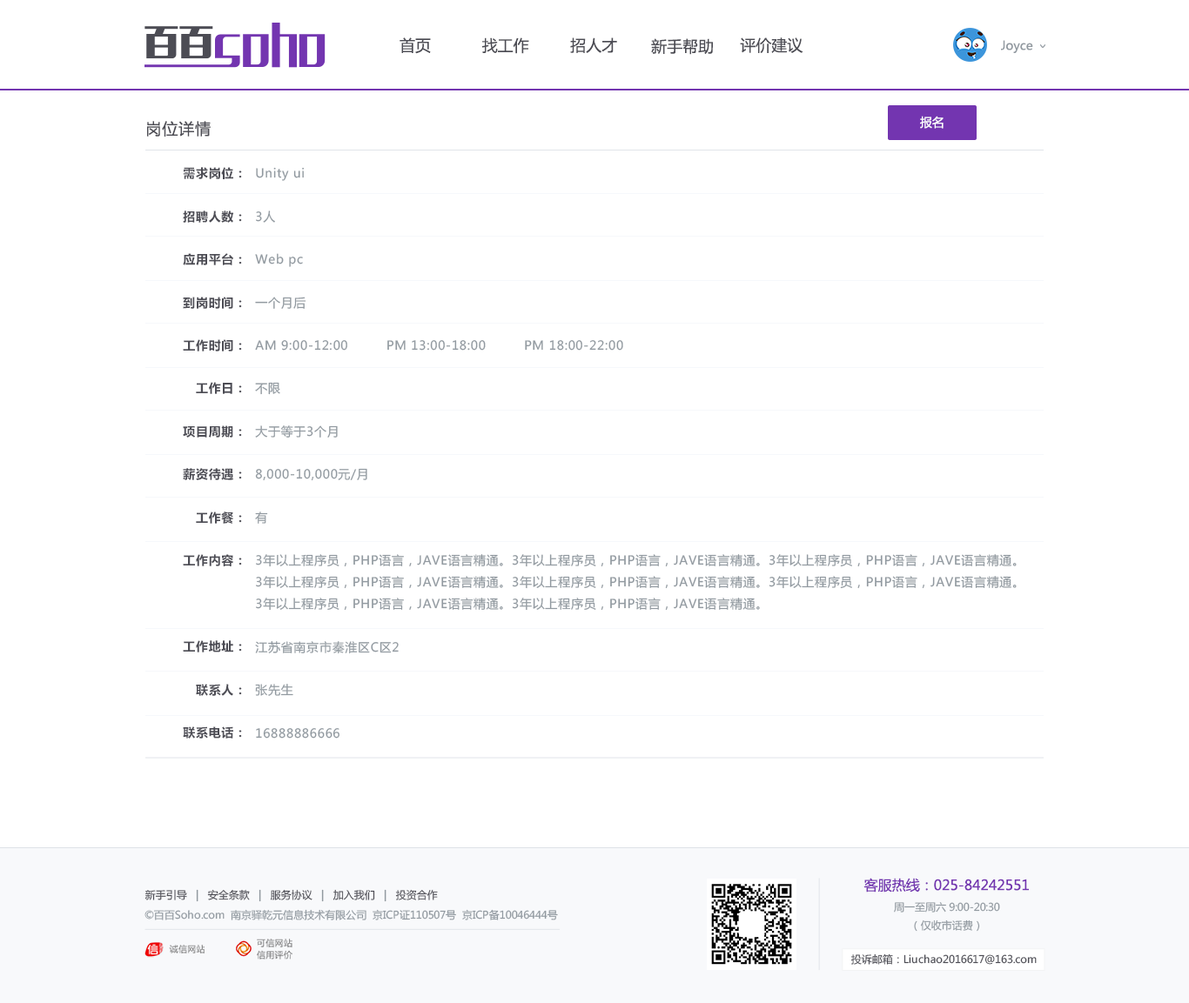
<style>
.page{position:relative;width:1189px;height:1003px;background:#ffffff}
.page>*{position:absolute;margin:0}
.t1{font:15.7px "MicrosoftYaHei";color:#4c4c54}
.t2{font:12.2px "MicrosoftYaHei";color:#9199a0}
.t3{font:15.7px "MicrosoftYaHei";letter-spacing:0.05em;color:#4c4c54}
.t4{font:12.2px "MicrosoftYaHei";color:#ffffff}
.t5{font:12.2px/43px "MicrosoftYaHei-Bold";letter-spacing:0.05em;color:#4c4c54}
.t6{font:12.2px/21.7px "MicrosoftYaHei";letter-spacing:0.05em;color:#9199a0}
.t7{font:12.2px/43px "MicrosoftYaHei";letter-spacing:0.05em;color:#9199a0}
.t8{font:13.9px "MicrosoftYaHei";color:#7335b0}
.t9{font:10.4px "MicrosoftYaHei";color:#4c4c54}
.t10{font:10.4px "MicrosoftYaHei";color:#9199a0}
.t11{font:10.4px/18px "MicrosoftYaHei";color:#9199a0}
</style>
<div class="page">
<p class="t1" style="left:399px;top:37px;width:32px;height:17px">首页</p>
<p class="t1" style="left:481px;top:37px;width:48px;height:17px">找工作</p>
<p class="t1" style="left:570px;top:37px;width:47px;height:16px">招人才</p>
<p class="t1" style="left:651px;top:38px;width:62px;height:17px">新手帮助</p>
<p class="t1" style="left:740px;top:37px;width:63px;height:16px">评价建议</p>
<p class="t2" style="left:1001px;top:40px;width:32px;height:13px">Joyce</p>
<p class="t3" style="left:147px;top:121px;width:64px;height:16px">岗位详情</p>
<p class="t4" style="left:920px;top:116px;width:23px;height:13px">报名</p>
<p class="t5" style="left:183px;top:167px;width:59px;height:572px;text-align:right">需求岗位：<br>招聘人数：<br>应用平台：<br>到岗时间：<br>工作时间：<br>工作日：<br>项目周期：<br>薪资待遇：<br>工作餐：<br>工作内容：<br><br>工作地址：<br>联系人：<br>联系电话：</p>
<p class="t6" style="left:255px;top:167px;width:761px;height:572px"><span class="t7">Unity ui<br>3人<br>Web pc<br>一个月后<br>AM 9:00-12:00         PM 13:00-18:00         PM 18:00-22:00<br>不限<br>大于等于3个月<br>8,000-10,000元/月<br>有<br></span>3年以上程序员，PHP语言，JAVE语言精通。3年以上程序员，PHP语言，JAVE语言精通。3年以上程序员，PHP语言，JAVE语言精通。3年以上程序员，PHP语言，JAVE语言精通。3年以上程序员，PHP语言，JAVE语言精通。3年以上程序员，PHP语言，JAVE语言精通。3年以上<span class="t7">程序员，PHP语言，JAVE语言精通。3年以上程序员，PHP语言，JAVE语言精通。<br>江苏省南京市秦淮区C区2<br>张先生<br>16888886666</span></p>
<p class="t8" style="left:863px;top:878px;width:165px;height:15px">客服热线：025-84242551</p>
<p class="t9" style="left:144px;top:889px;width:294px;height:13px">新手引导  <span class="t10"> |   </span>安全条款  <span class="t10"> |   </span>服务协议  <span class="t10"> |   </span>加入我们  <span class="t10"> |   </span>投资合作</p>
<p class="t11" style="left:894px;top:902px;width:106px;height:30px;text-align:center">周一至周六 9:00-20:30<br>（仅收市话费）</p>
<p class="t10" style="left:144px;top:909px;width:414px;height:12px">©百百Soho.com  南京驿乾元信息技术有限公司  京ICP证110507号  京ICP备10046444号</p>
<p class="t9" style="left:850px;top:954px;width:186px;height:11px">投诉邮箱：Liuchao2016617@163.com</p>
</div>
